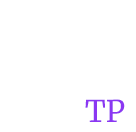
<style>
.page{position:relative;width:136px;height:132px;background:#ffffff}
.page>*{position:absolute;margin:0}
.t1{font:29.7px "Merriweather-Regular";color:#8b37f2}
</style>
<div class="page">
<p class="t1" style="left:85px;top:99px;width:40px;height:23px">TP</p>
</div>
